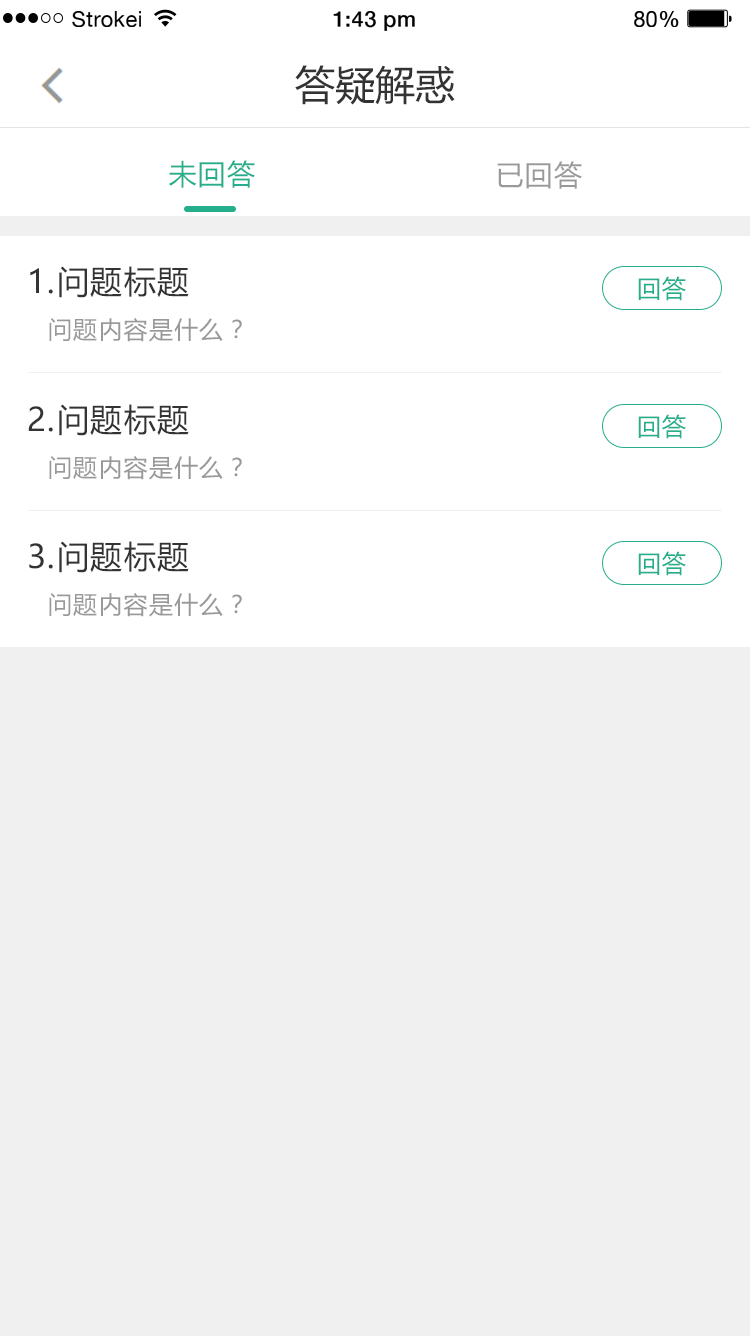
<style>
.page{position:relative;width:750px;height:1336px;background:#f0f0f0}
.page>*{position:absolute;margin:0}
.t1{font:21.8px "HelveticaNeue";letter-spacing:0.02em;color:#000000}
.t2{font:21.8px "HelveticaNeue-Medium";letter-spacing:0.02em;color:#000000}
.t3{font:40px "MicrosoftYaHei";color:#333333}
.t4{font:28px "MicrosoftYaHei";letter-spacing:0.05em;color:#24ae8c}
.t5{font:28px "MicrosoftYaHei";letter-spacing:0.05em;color:#999999}
.t6{font:32px "MicrosoftYaHei";letter-spacing:0.05em;color:#333333}
.t7{font:24px "MicrosoftYaHei";letter-spacing:0.05em;color:#24ae8c}
.t8{font:24px "MicrosoftYaHei";letter-spacing:0.05em;color:#999999}
</style>
<div class="page">
<p class="t1" style="left:72px;top:11px;width:69px;height:16px">Strokei</p>
<p class="t2" style="left:333px;top:11px;width:82px;height:20px">1:43 pm</p>
<p class="t1" style="left:634px;top:11px;width:45px;height:16px">80<span class="t2">%</span></p>
<p class="t3" style="left:295px;top:65px;width:160px;height:40px">答疑解惑</p>
<p class="t4" style="left:169px;top:160px;width:86px;height:28px">未回答</p>
<p class="t5" style="left:497px;top:161px;width:85px;height:28px">已回答</p>
<p class="t6" style="left:30px;top:266px;width:159px;height:32px">1.问题标题</p>
<p class="t7" style="left:638px;top:276px;width:48px;height:25px">回答</p>
<p class="t8" style="left:49px;top:318px;width:193px;height:24px">问题内容是什么？</p>
<p class="t6" style="left:28px;top:404px;width:161px;height:32px">2.问题标题</p>
<p class="t7" style="left:638px;top:414px;width:48px;height:25px">回答</p>
<p class="t8" style="left:49px;top:456px;width:193px;height:24px">问题内容是什么？</p>
<p class="t6" style="left:29px;top:541px;width:160px;height:32px">3.问题标题</p>
<p class="t7" style="left:638px;top:551px;width:48px;height:25px">回答</p>
<p class="t8" style="left:49px;top:593px;width:193px;height:24px">问题内容是什么？</p>
</div>
